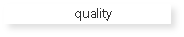
<style>
.page{position:relative;width:184px;height:37px;background:#ffffff}
.page>*{position:absolute;margin:0}
.t1{font:14px "MyriadPro-Regular";color:#313131}
</style>
<div class="page">
<p class="t1" style="left:75px;top:8px;width:37px;height:13px">quality</p>
</div>
